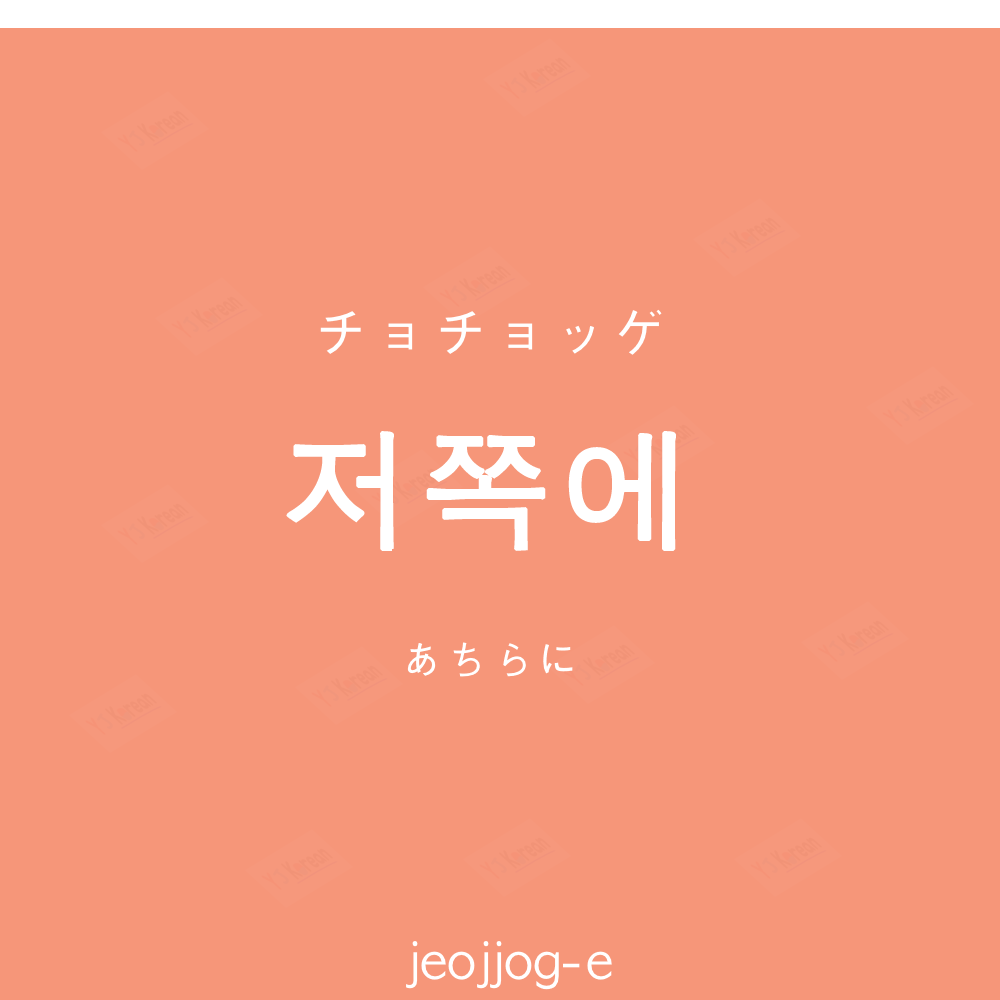
<style>
.page{position:relative;width:1000px;height:1000px;background:#f69679}
.page>*{position:absolute;margin:0}
.t1{font:60px "AppleGothic";color:#ffffff}
.t2{font:130px "AppleGothic";letter-spacing:0.04em;color:#ffffff;font-weight:bold}
.t3{font:45px "AppleGothic";color:#ffffff}
.t4{font:50px "AppleGothic";color:#ffffff}
</style>
<div class="page">
<p class="t1" style="left:320px;top:309px;width:342px;height:46px">チョチョッゲ</p>
<p class="t2" style="left:286px;top:431px;width:390px;height:120px">저쪽에</p>
<p class="t3" style="left:407px;top:642px;width:166px;height:35px">あちらに</p>
<p class="t4" style="left:406px;top:941px;width:206px;height:49px">jeojjog-e</p>
</div>
